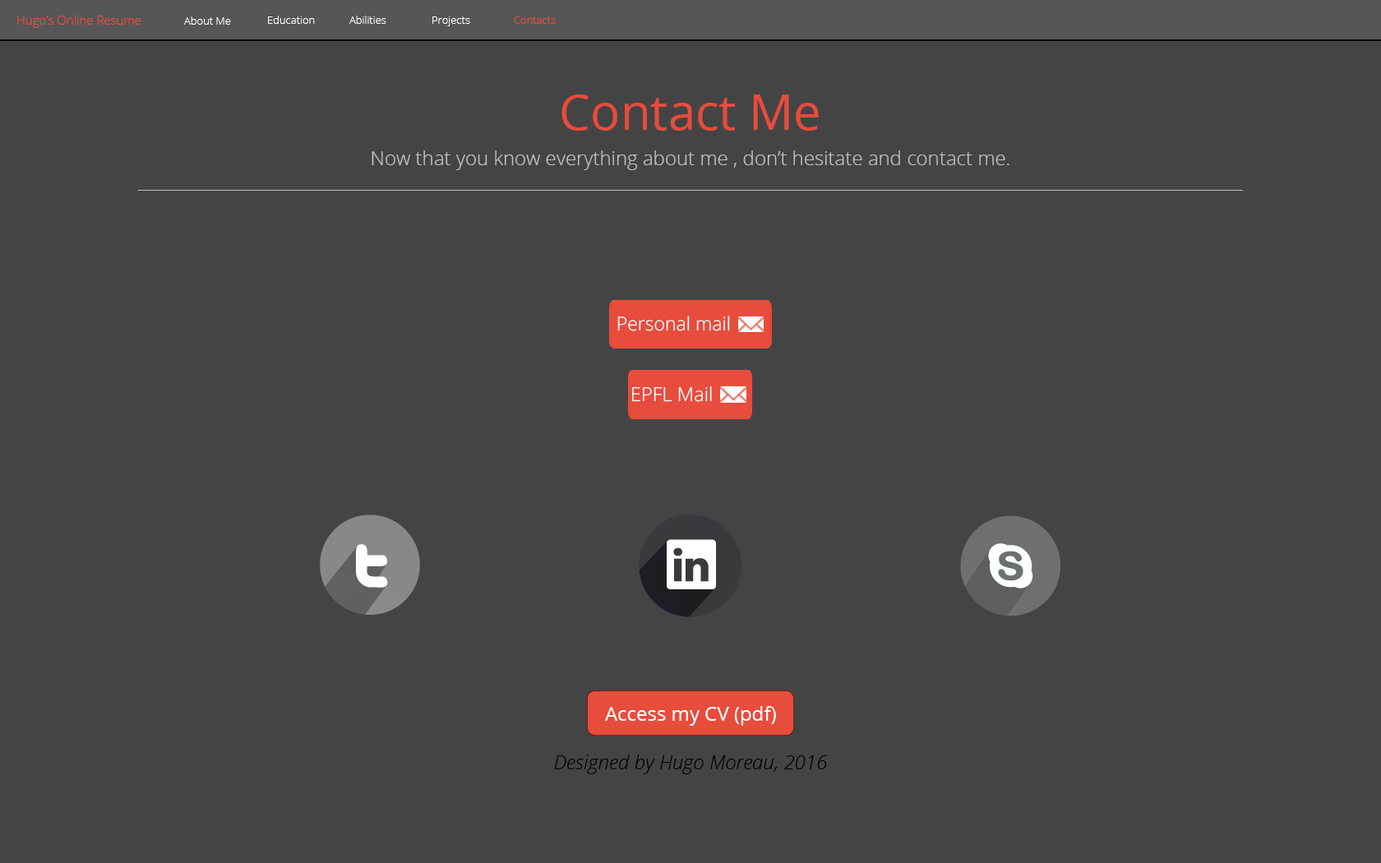
<style>
.page{position:relative;width:1381px;height:863px;background:#454444}
.page>*{position:absolute;margin:0}
.t1{font:12.3px "OpenSans-Light";color:#e74c3c}
.t2{font:10.7px "OpenSans-Light";color:#ffffff}
.t3{font:10.7px "OpenSans-Light";color:#e74c3c}
.t4{font:49.3px "OpenSans";color:#e74c3c}
.t5{font:19.7px "OpenSans-Light";color:#bdc3c7}
.t6{font:19px "OpenSans-Light";color:#ffffff}
.t7{font:19.3px "OpenSans-Light";color:#ffffff}
.t8{font:19.7px "OpenSans";color:#ffffff}
.t9{font:19.7px "OpenSansLight-Italic";color:#000000}
</style>
<div class="page">
<p class="t1" style="left:17px;top:15px;width:124px;height:13px">Hugo’s Online Resume</p>
<p class="t2" style="left:184px;top:16px;width:47px;height:9px">About Me</p>
<p class="t2" style="left:268px;top:16px;width:47px;height:8px">Education</p>
<p class="t2" style="left:349px;top:16px;width:37px;height:8px">Abilities</p>
<p class="t2" style="left:432px;top:16px;width:38px;height:10px">Projects</p>
<p class="t3" style="left:514px;top:16px;width:42px;height:8px">Contacts</p>
<p class="t4" style="left:562px;top:95px;width:257px;height:36px">Contact Me</p>
<p class="t5" style="left:372px;top:150px;width:638px;height:20px">Now that you know everything about me , don’t hesitate and contact me.</p>
<p class="t6" style="left:617px;top:316px;width:113px;height:15px">Personal mail</p>
<p class="t7" style="left:632px;top:386px;width:80px;height:16px">EPFL Mail</p>
<p class="t8" style="left:605px;top:706px;width:171px;height:20px">Access my CV (pdf)</p>
<p class="t9" style="left:554px;top:755px;width:274px;height:19px">Designed by Hugo Moreau, 2016</p>
</div>
